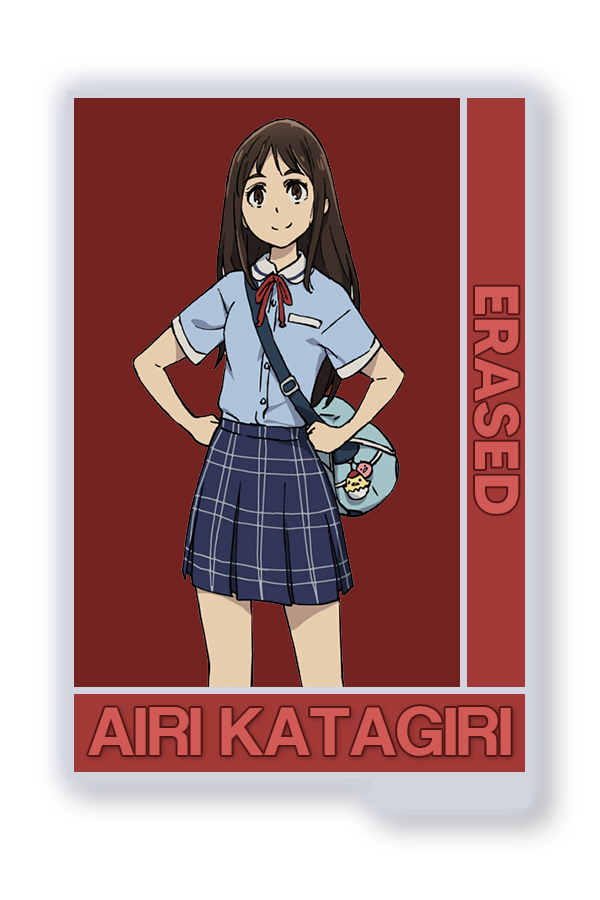
<style>
.page{position:relative;width:600px;height:900px;background:#742320}
.page>*{position:absolute;margin:0}
.t1{font:61.9px "MADETOMMY-Bold";color:#d15a56}
.t2{font:72.1px "CoolveticaRg-Regular";color:#d15a56}
</style>
<div class="page">
<p class="t1" style="left:474px;top:286px;width:45px;height:228px;rotate:90deg">ERASED</p>
<p class="t2" style="left:88px;top:706px;width:423px;height:50px">AIRI KATAGIRI</p>
</div>
